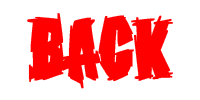
<style>
.page{position:relative;width:200px;height:100px;background:#ffffff}
.page>*{position:absolute;margin:0}
.t1{font:66.7px "GhostArmorRegular";color:#ff0000;font-weight:bold;scale:0.85 1}
</style>
<div class="page">
<p class="t1" style="left:27px;top:13px;width:146px;height:76px">Back</p>
</div>
